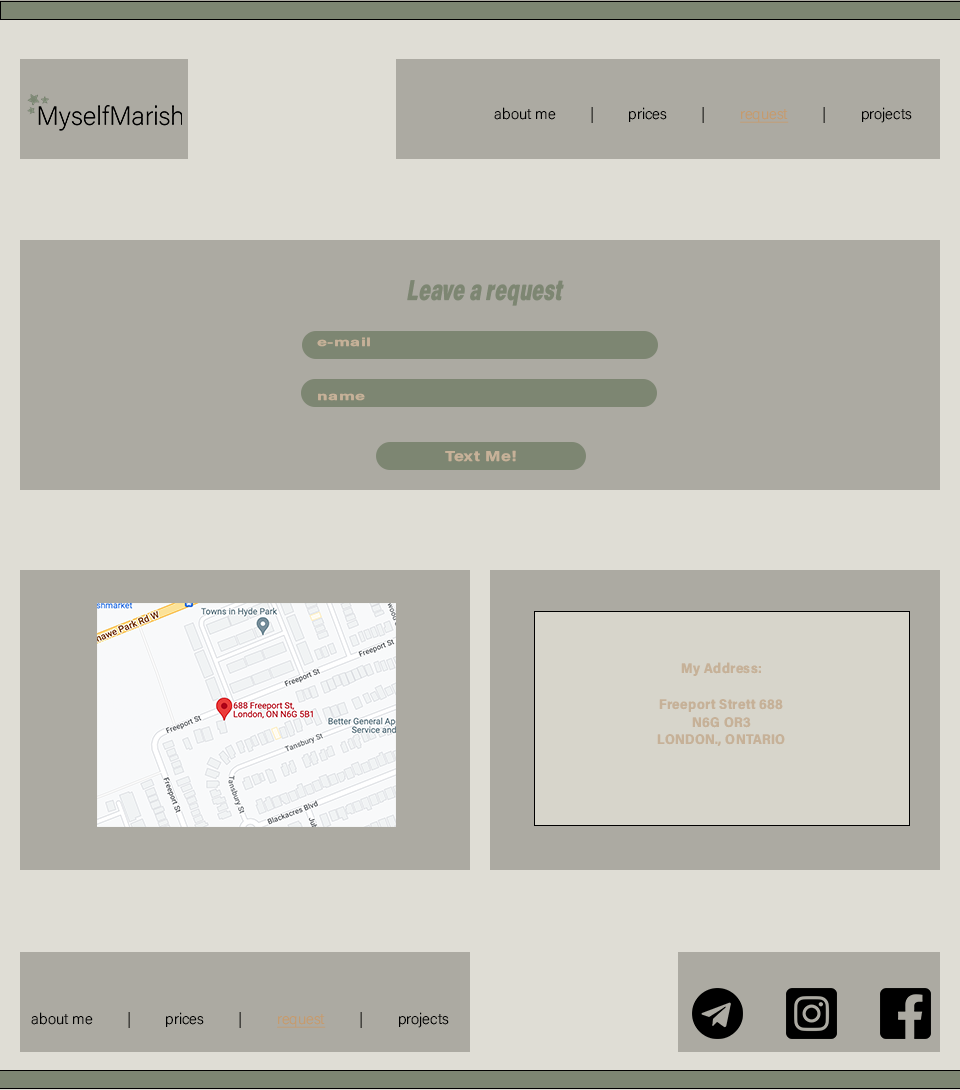
<style>
.page{position:relative;width:960px;height:1090px;background:#acaaa2}
.page>*{position:absolute;margin:0}
.t1{font:15.2px "AcuminVariableConcept";color:#000000}
.t2{font:15.2px "AcuminVariableConcept";color:#010101}
.t3{font:15.2px "AcuminVariableConcept";letter-spacing:1.4em;color:#000000}
.t4{font:15.2px "AcuminVariableConcept";color:#c59b6d;text-decoration:underline}
.t5{font:29.3px "AcuminConcept-SemiCondensedBlack";letter-spacing:0.01em;color:#7d8672;scale:0.7 1}
.t6{font:11.6px "AcuminConcept-SemiCondensedBold";letter-spacing:0.024em;color:#c6b198;scale:1.61 1}
.t7{font:14.5px "AcuminConcept-SemiCondensedBold";letter-spacing:0.024em;color:#c6b198;scale:1.28 1}
.t8{font:14px/17.7px "AcuminConcept-SemiCondensedBold";letter-spacing:0.024em;color:#c6b198}
</style>
<div class="page">
<p class="t1" style="left:494px;top:107px;width:418px;height:16px"><span class="t2">about me </span>| prices <span class="t3">| </span><span class="t4">request </span>| projects</p>
<p class="t5" style="left:407px;top:280px;width:157px;height:26px">Leave a request</p>
<p class="t6" style="left:317px;top:337px;width:53px;height:10px">e-mail</p>
<p class="t6" style="left:318px;top:393px;width:47px;height:8px">name</p>
<p class="t7" style="left:445px;top:450px;width:71px;height:12px">Text Me!</p>
<p class="t8" style="left:657px;top:662px;width:128px;height:84px;text-align:center">My Address:<br><br>Freeport Strett 688<br>N6G OR3<br>LONDON., ONTARIO</p>
<p class="t1" style="left:31px;top:1012px;width:418px;height:16px"><span class="t2">about me </span>| prices <span class="t3">| </span><span class="t4">request </span>| projects</p>
</div>
